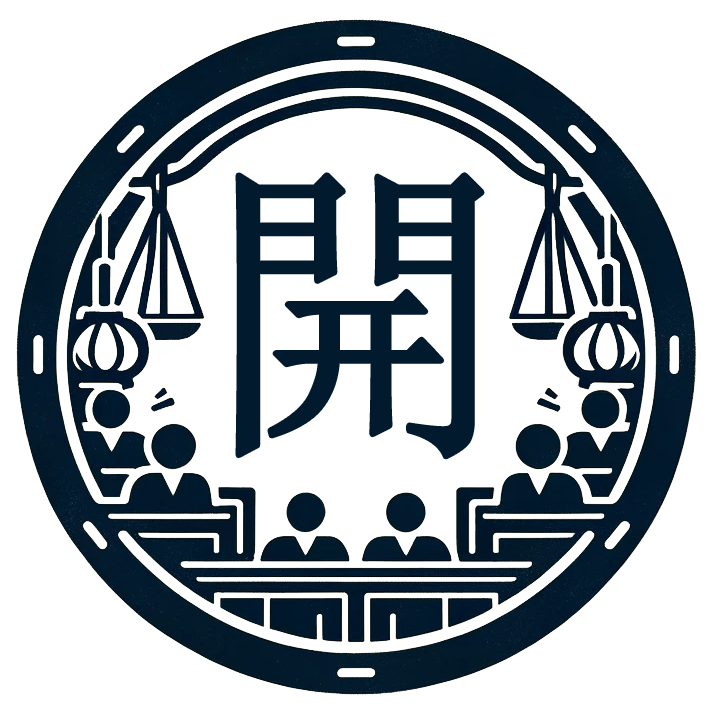
<style>
.page{position:relative;width:713px;height:714px;background:#ffffff}
.page>*{position:absolute;margin:0}
.t1{font:314px "NSimSun";letter-spacing:0.86em;color:#021a2e}
</style>
<div class="page">
<p class="t1" style="left:238px;top:175px;width:244px;height:282px">開</p>
</div>
